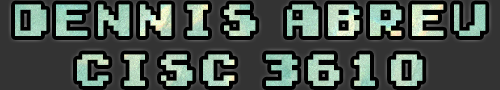
<style>
.page{position:relative;width:500px;height:90px;background:#333333}
.page>*{position:absolute;margin:0}
.t1{font:42.1px "Early-GameBoy"}
</style>
<div class="page">
<p class="t1" style="left:15px;top:4px;width:471px;height:82px;text-align:center">Dennis Abreu<br>CISC 3610</p>
</div>
